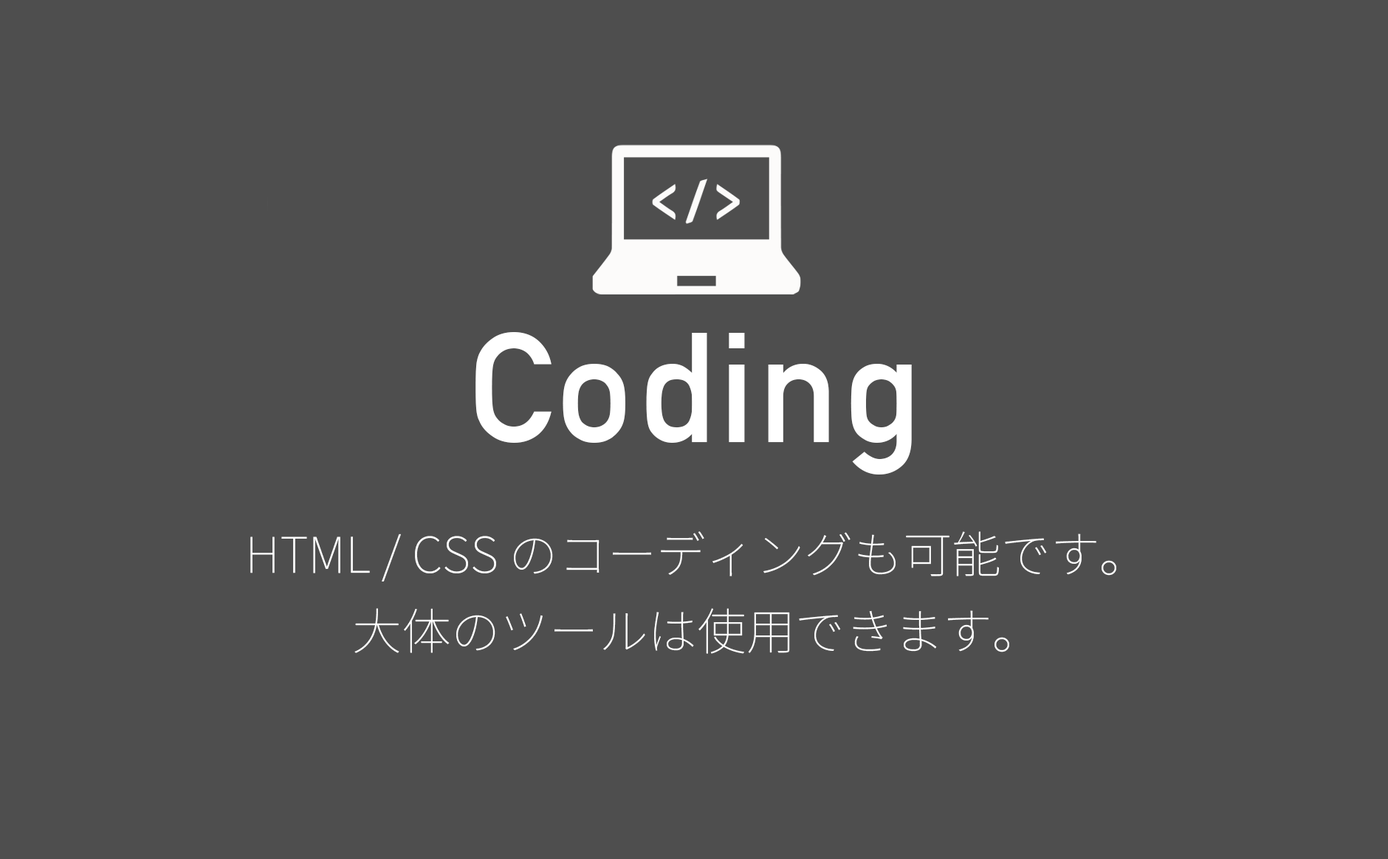
<style>
.page{position:relative;width:1388px;height:859px;background:#4e4e4e}
.page>*{position:absolute;margin:0}
.t1{font:153.2px "DINAlternate-Bold";letter-spacing:0.02em;color:#ffffff}
.t2{font:49.2px/76.9px "NotoSansJP-Thin";color:#ffffff}
</style>
<div class="page">
<p class="t1" style="left:475px;top:332px;width:437px;height:143px">Coding</p>
<p class="t2" style="left:250px;top:531px;width:866px;height:123px;text-align:center">HTML / CSS のコーディングも可能です。<br>大体のツールは使用できます。</p>
</div>
